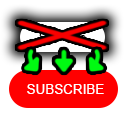
<style>
.page{position:relative;width:128px;height:128px;background:#ffffff}
.page>*{position:absolute;margin:0}
.t1{font:13.4px "ArialMT";color:#ffffff}
</style>
<div class="page">
<p class="t1" style="left:27px;top:84px;width:77px;height:10px">SUBSCRIBE</p>
</div>
